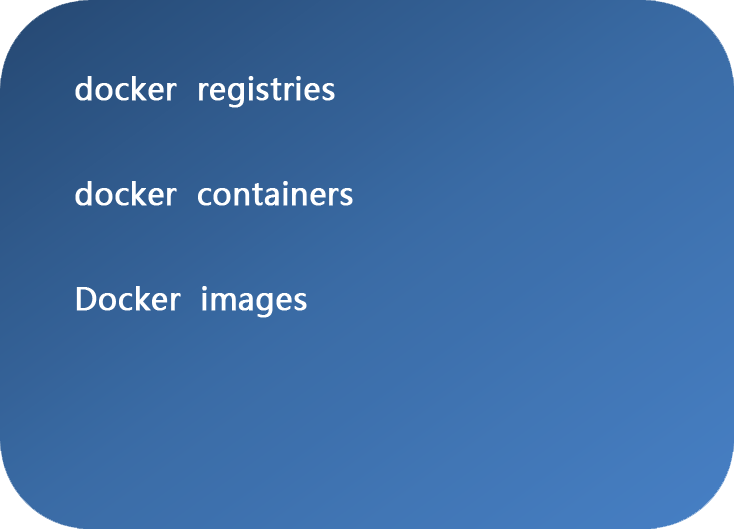
<style>
.page{position:relative;width:734px;height:529px}
.page>*{position:absolute;margin:0}
.t1{font:30px "MicrosoftYaHei";color:#ffffff;font-weight:bold}
</style>
<div class="page">
<p class="t1" style="left:75px;top:76px;width:278px;height:242px">docker  registries<br><br>docker  containers<br><br>Docker  images</p>
</div>
